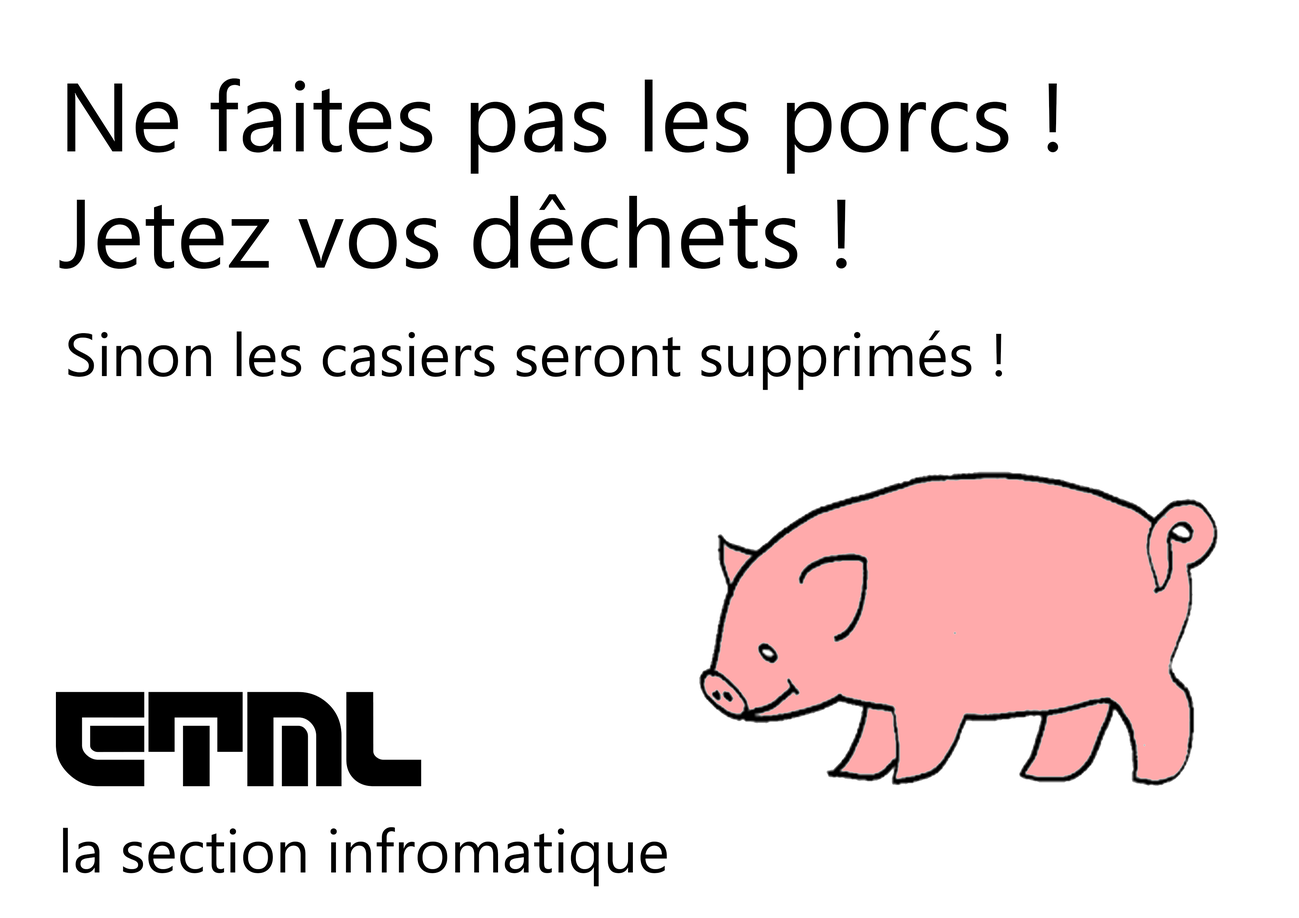
<style>
.page{position:relative;width:1299px;height:918px;background:#ffffff}
.page>*{position:absolute;margin:0}
.t1{font:97px "MicrosoftPhagsPa";color:#000000}
.t2{font:60.3px "MicrosoftPhagsPa";color:#000000}
.t3{font:97px "ETML-Regular";color:#000000}
</style>
<div class="page">
<p class="t1" style="left:59px;top:78px;width:999px;height:191px">Ne faites pas les porcs !<br>Jetez vos dêchets !</p>
<p class="t2" style="left:68px;top:330px;width:934px;height:60px">Sinon les casiers seront supprimés !</p>
<p class="t3" style="left:56px;top:692px;width:365px;height:94px">ETML</p>
<p class="t2" style="left:63px;top:827px;width:604px;height:60px">la section infromatique</p>
</div>
